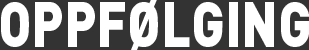
<style>
.page{position:relative;width:309px;height:50px;background:#ffffff}
.page>*{position:absolute;margin:0}
.t1{font:62.5px "DIN-Black";color:#ffffff;scale:0.83 1}
</style>
<div class="page">
<p class="t1" style="left:1px;top:0px;width:309px;height:50px">OPPFØLGING</p>
</div>
